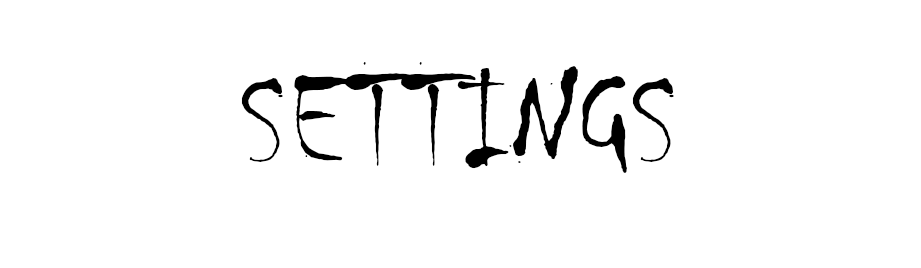
<style>
.page{position:relative;width:921px;height:268px;background:#ffffff}
.page>*{position:absolute;margin:0}
.t1{font:141.7px "Chiller-Regular";color:#000000}
</style>
<div class="page">
<p class="t1" style="left:241px;top:62px;width:433px;height:111px">SETTINGS</p>
</div>
